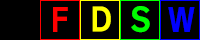
<style>
.page{position:relative;width:200px;height:40px;background:#000000}
.page>*{position:absolute;margin:0}
.t1{font:32px "Yj-TEUNTEUN--Bold";color:#ffff00}
.t2{font:32px "Yj-TEUNTEUN--Bold";color:#00ff00}
.t3{font:32px "Yj-TEUNTEUN--Bold";color:#ff0000}
.t4{font:32px "Yj-TEUNTEUN--Bold";color:#0000ff}
</style>
<div class="page">
<p class="t1" style="left:92px;top:6px;width:19px;height:26px">D</p>
<p class="t2" style="left:131px;top:6px;width:19px;height:27px">S</p>
<p class="t3" style="left:53px;top:7px;width:15px;height:25px">F</p>
<p class="t4" style="left:168px;top:7px;width:27px;height:25px">W</p>
</div>
